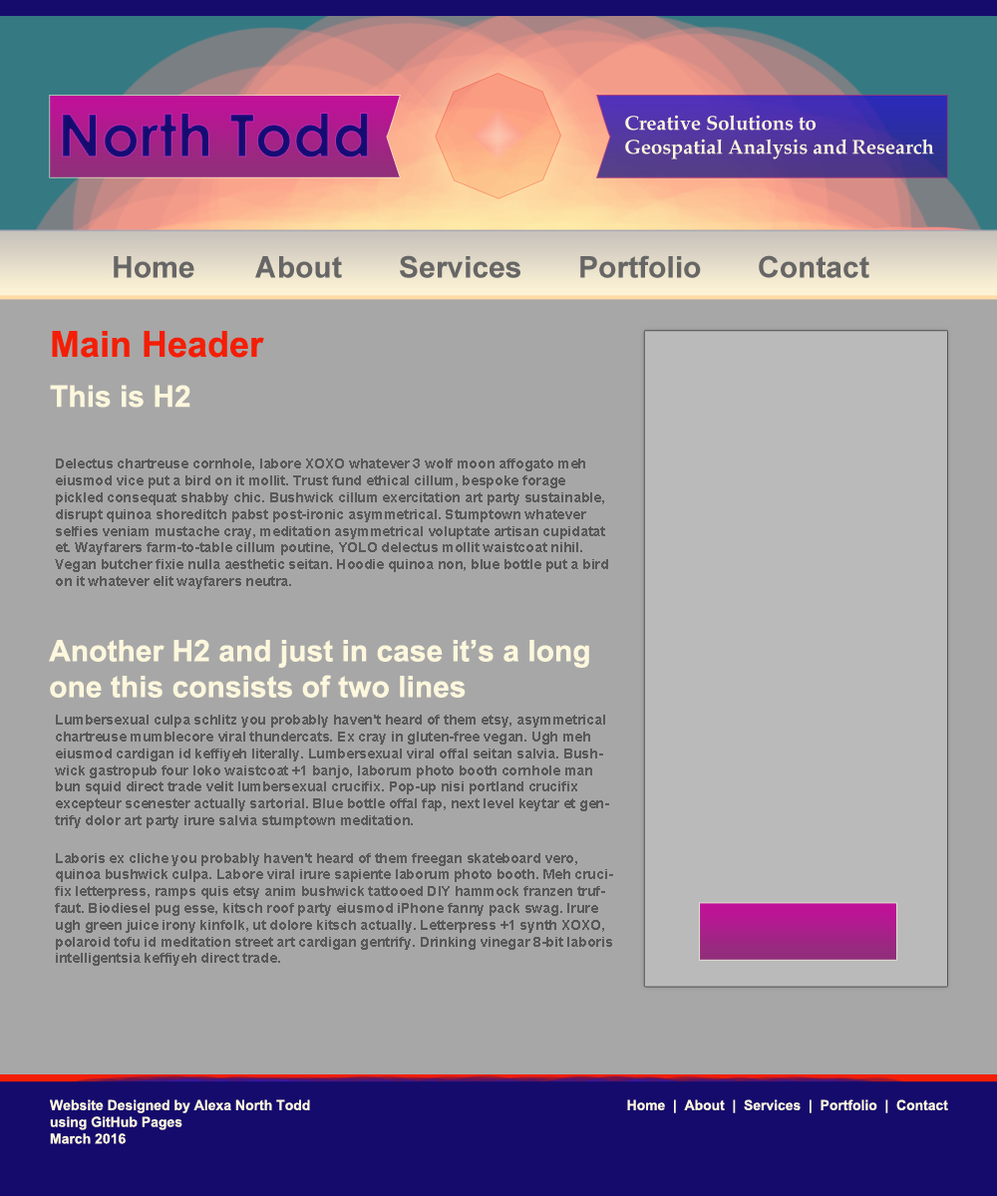
<style>
.page{position:relative;width:997px;height:1196px;background:#a7a7a7}
.page>*{position:absolute;margin:0}
.t1{font:59.8px "CenturyGothic-Bold";color:#150b6c}
.t2{font:19.9px "Palatino-Bold";color:#fdf7dd}
.t3{font:29.9px "Arial-BoldMT";color:#676666}
.t4{font:35.9px "Arial-BoldMT";color:#f41e06}
.t5{font:29.9px "Arial-BoldMT";color:#fdf7dd}
.t6{font:14px "Arial-BoldMT";color:#595959}
.t7{font:14px "Arial-BoldMT";color:#fdf7dd}
</style>
<div class="page">
<p class="t1" style="left:62px;top:113px;width:307px;height:45px">North Todd</p>
<p class="t2" style="left:625px;top:115px;width:309px;height:44px">Creative Solutions to <br>Geospatial Analysis and Research</p>
<p class="t3" style="left:114px;top:255px;width:755px;height:23px">Home  About  Services  Portfolio  Contact</p>
<p class="t4" style="left:52px;top:331px;width:212px;height:27px">Main Header</p>
<p class="t5" style="left:50px;top:385px;width:140px;height:23px">This is H2</p>
<p class="t6" style="left:55px;top:459px;width:553px;height:130px">Delectus chartreuse cornhole, labore XOXO whatever 3 wolf moon affogato meh eiusmod vice put a bird on it mollit. Trust fund ethical cillum, bespoke forage pickled consequat shabby chic. Bushwick cillum exercitation art party sustainable, disrupt quinoa shoreditch pabst post-ironic asymmetrical. Stumptown whatever selfies veniam mustache cray, meditation asymmetrical voluptate artisan cupidatat et. Wayfarers farm-to-table cillum poutine, YOLO delectus mollit waistcoat nihil. Vegan butcher fixie nulla aesthetic seitan. Hoodie quinoa non, blue bottle put a bird on it whatever elit wayfarers neutra.</p>
<p class="t5" style="left:49px;top:639px;width:540px;height:59px">Another H2 and just in case it’s a long one this consists of two lines</p>
<p class="t6" style="left:55px;top:715px;width:558px;height:251px">Lumbersexual culpa schlitz you probably haven't heard of them etsy, asymmetrical chartreuse mumblecore viral thundercats. Ex cray in gluten-free vegan. Ugh meh eiusmod cardigan id keffiyeh literally. Lumbersexual viral offal seitan salvia. Bushwick gastropub four loko waistcoat +1 banjo, laborum photo booth cornhole man bun squid direct trade velit lumbersexual crucifix. Pop-up nisi portland crucifix excepteur scenester actually sartorial. Blue bottle offal fap, next level keytar et gentrify dolor art party irure salvia stumptown meditation.<br> <br>Laboris ex cliche you probably haven't heard of them freegan skateboard vero, quinoa bushwick culpa. Labore viral irure sapiente laborum photo booth. Meh crucifix letterpress, ramps quis etsy anim bushwick tattooed DIY hammock franzen truffaut. Biodiesel pug esse, kitsch roof party eiusmod iPhone fanny pack swag. Irure ugh green juice irony kinfolk, ut dolore kitsch actually. Letterpress +1 synth XOXO, polaroid tofu id meditation street art cardigan gentrify. Drinking vinegar 8-bit laboris intelligentsia keffiyeh direct trade.</p>
<p class="t7" style="left:50px;top:1100px;width:260px;height:44px">Website Designed by Alexa North Todd<br>using GitHub Pages<br>March 2016</p>
<p class="t7" style="left:627px;top:1100px;width:321px;height:13px">Home  |  About  |  Services  |  Portfolio  |  Contact</p>
</div>
